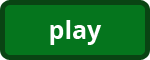
<style>
.page{position:relative;width:150px;height:60px;background:#05751d}
.page>*{position:absolute;margin:0}
.t1{font:25px "OpenSans-Bold";color:#ffffff}
</style>
<div class="page">
<p class="t1" style="left:50px;top:20px;width:52px;height:25px">play</p>
</div>
